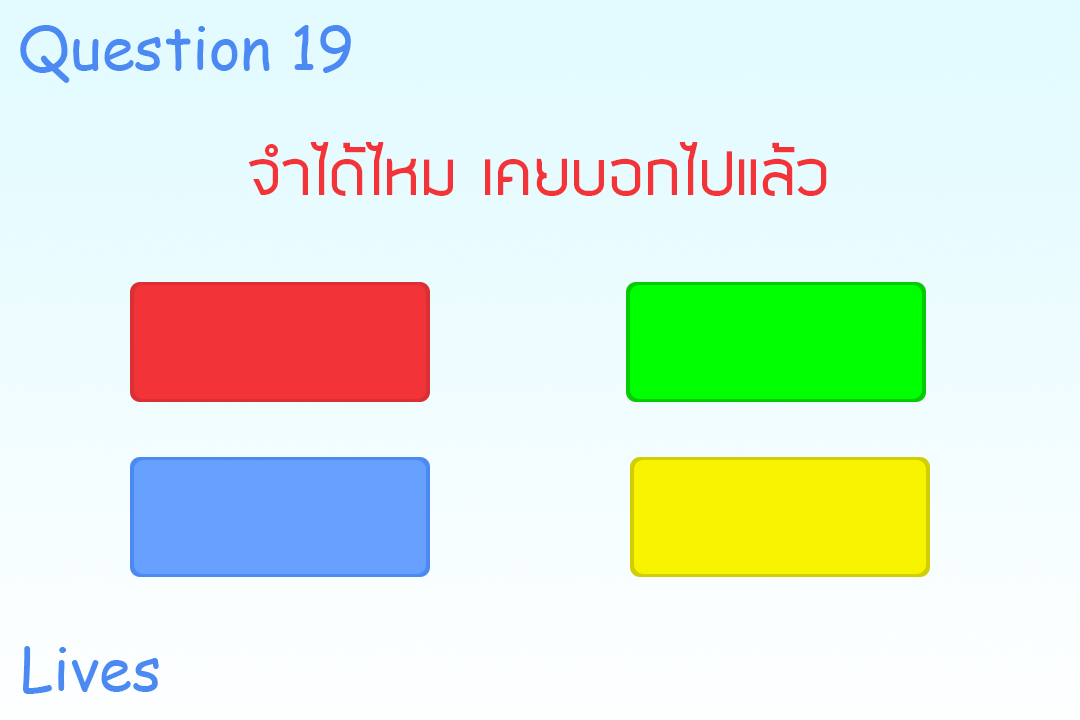
<style>
.page{position:relative;width:1080px;height:720px}
.page>*{position:absolute;margin:0}
.t1{font:60px "ComicSansMS";color:#4b8af2}
.t2{font:72px "SuperspaceRegular";color:#f23439}
.t3{font:59.6px "ComicSansMS";color:#4b8af2}
</style>
<div class="page">
<p class="t1" style="left:20px;top:25px;width:331px;height:58px">Question 19</p>
<p class="t2" style="left:248px;top:142px;width:579px;height:54px">จำได้ไหม เคยบอกไปแล้ว</p>
<p class="t3" style="left:23px;top:646px;width:136px;height:48px">Lives</p>
</div>
